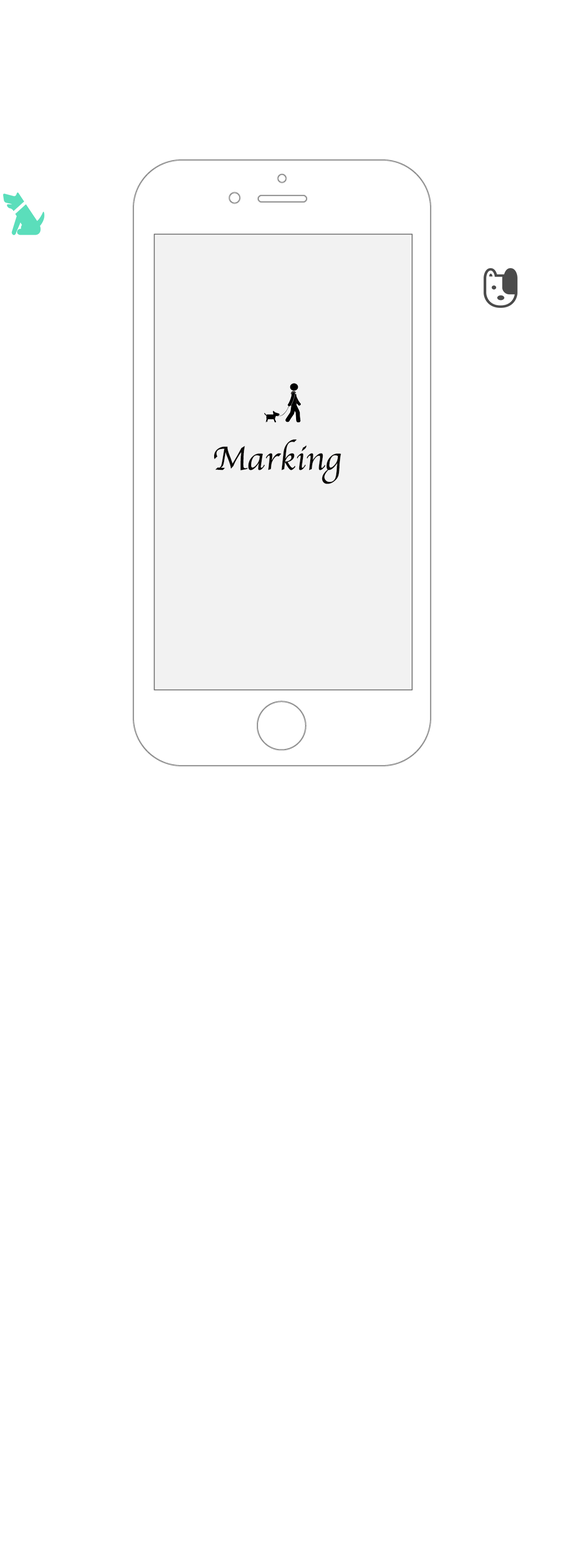
<style>
.page{position:relative;width:564px;height:1568px;background:#ffffff}
.page>*{position:absolute;margin:0}
.t1{font:34.8px "Apple-Chancery";color:#0d0b08}
</style>
<div class="page">
<p class="t1" style="left:214px;top:439px;width:127px;height:45px">Marking</p>
</div>
